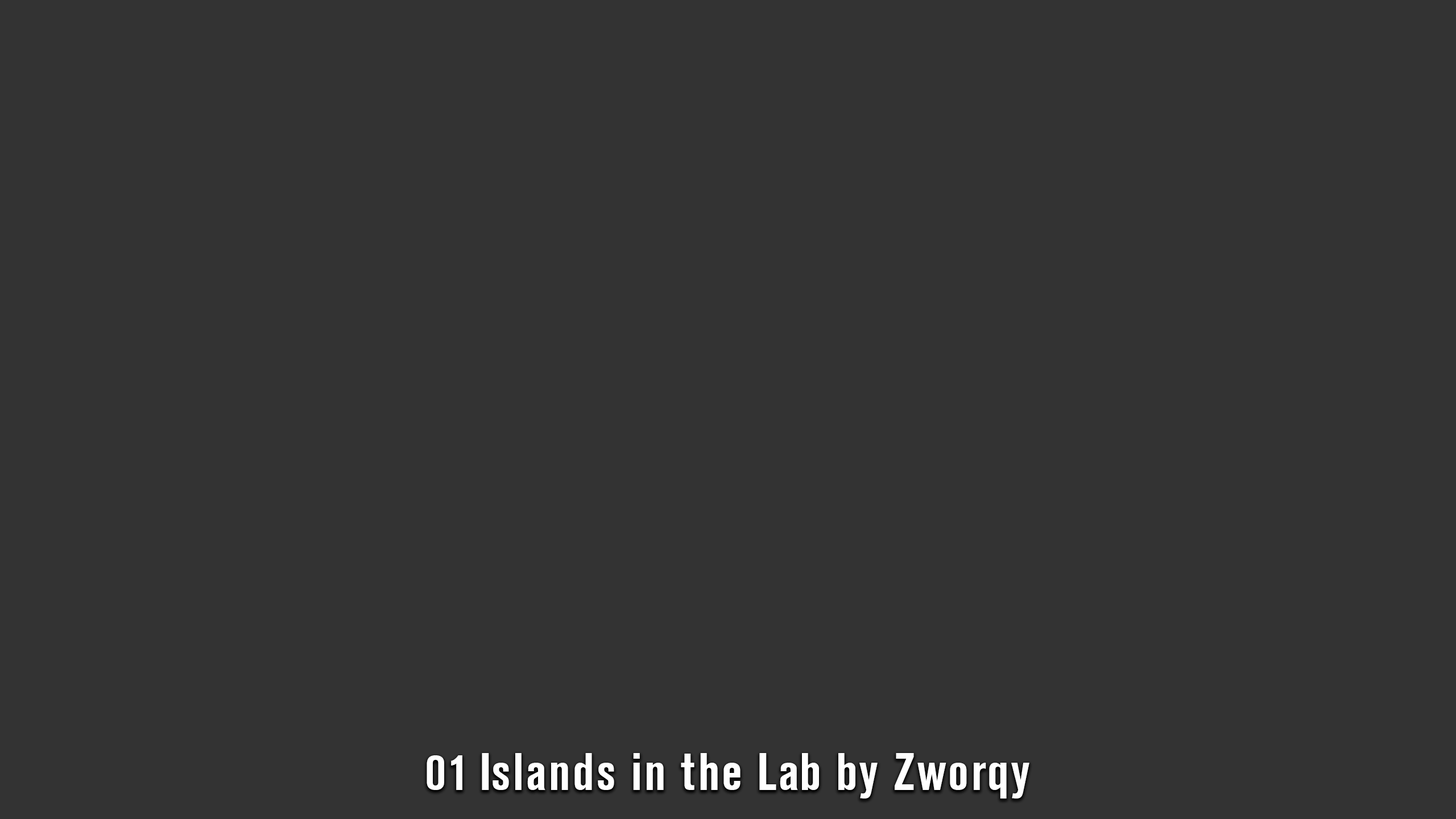
<style>
.page{position:relative;width:1456px;height:819px;background:#333333}
.page>*{position:absolute;margin:0}
.t1{font:51.2px "AkzidenzGroteskCn_PFL-Bold";letter-spacing:0.03em;color:#ffffff}
</style>
<div class="page">
<p class="t1" style="left:427px;top:753px;width:602px;height:46px">01 Islands in the Lab by Zworqy</p>
</div>
